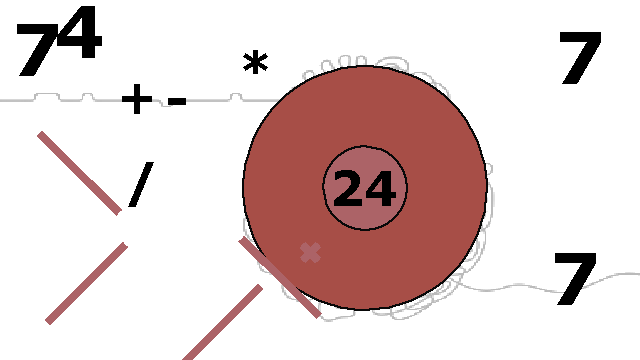
<style>
.page{position:relative;width:640px;height:360px;background:#ffffff}
.page>*{position:absolute;margin:0}
.t1{font:72px "Verdana-Bold";color:#000000}
.t2{font:48px "Verdana-Bold";color:#000000}
</style>
<div class="page">
<p class="t1" style="left:57px;top:6px;width:45px;height:52px">4</p>
<p class="t1" style="left:17px;top:24px;width:41px;height:52px">7</p>
<p class="t1" style="left:560px;top:32px;width:41px;height:52px">7</p>
<p class="t2" style="left:243px;top:50px;width:25px;height:24px">*</p>
<p class="t2" style="left:122px;top:84px;width:30px;height:30px">+</p>
<p class="t2" style="left:128px;top:162px;width:26px;height:45px">/</p>
<p class="t2" style="left:334px;top:170px;width:62px;height:36px">24</p>
<p class="t1" style="left:555px;top:253px;width:41px;height:52px">7</p>
</div>
